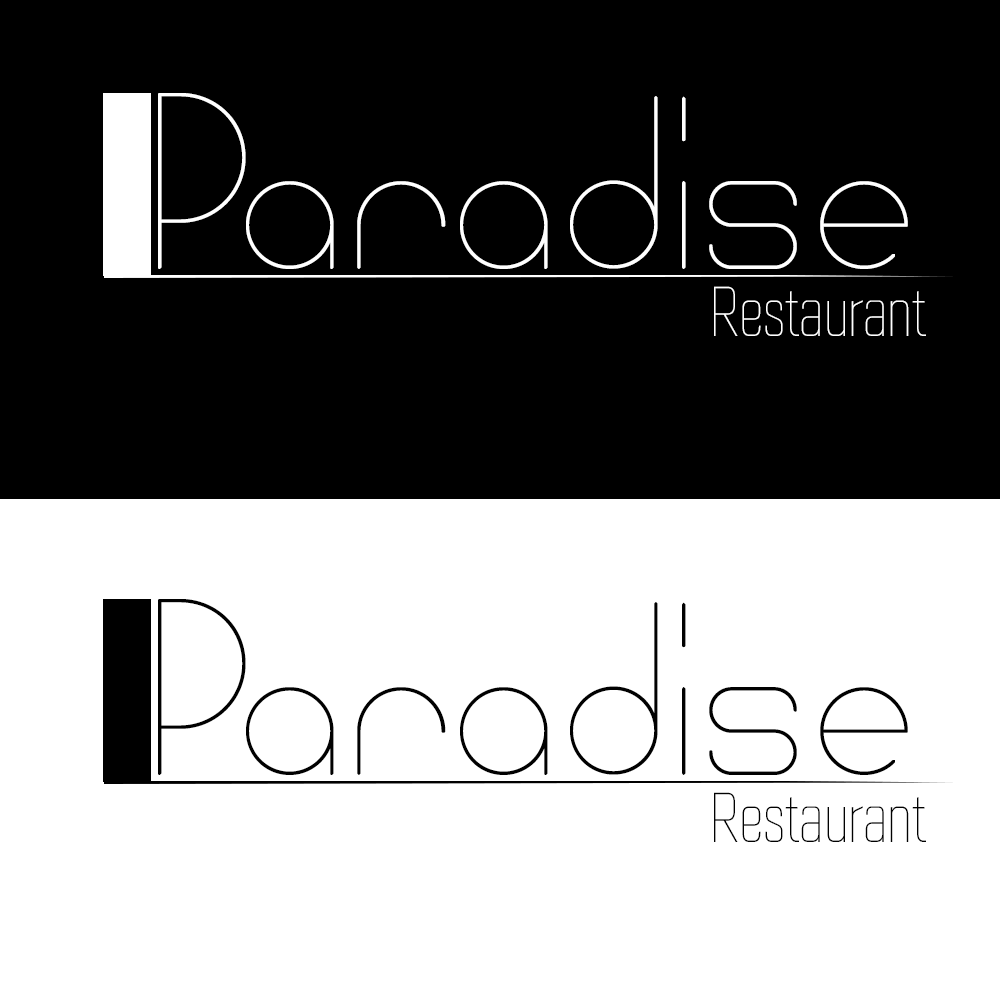
<style>
.page{position:relative;width:1000px;height:1000px;background:#ffffff}
.page>*{position:absolute;margin:0}
.t1{font:280px "Bowhouse-Light";color:#ffffff}
.t2{font:69.3px "Quarca-ConThi";color:#ffffff}
.t3{font:280px "Bowhouse-Light";color:#010101}
.t4{font:69.3px "Quarca-ConThi";color:#010101}
</style>
<div class="page">
<p class="t1" style="left:158px;top:93px;width:750px;height:176px">Paradise</p>
<p class="t2" style="left:714px;top:286px;width:212px;height:50px">Restaurant</p>
<p class="t3" style="left:158px;top:599px;width:750px;height:176px">Paradise</p>
<p class="t4" style="left:714px;top:792px;width:212px;height:50px">Restaurant</p>
</div>
